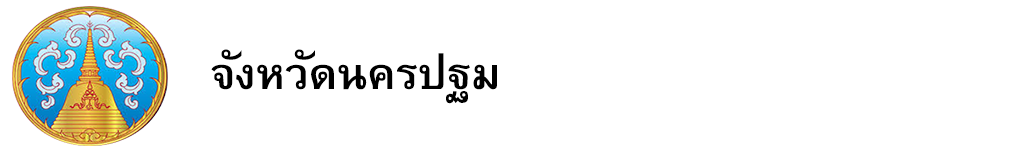
<style>
.page{position:relative;width:1024px;height:150px;background:#ffffff}
.page>*{position:absolute;margin:0}
.t1{font:60px "BrowalliaNew-Bold";color:#000000}
</style>
<div class="page">
<p class="t1" style="left:211px;top:49px;width:286px;height:55px">จังหวัดนครปฐม</p>
</div>
